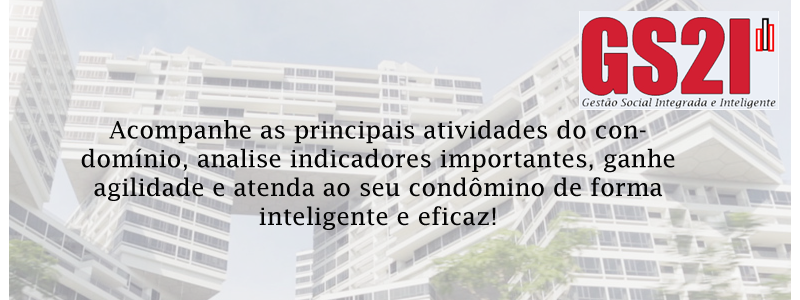
<style>
.page{position:relative;width:800px;height:300px}
.page>*{position:absolute;margin:0}
.t1{font:24px "LucidaFax";color:#040404}
</style>
<div class="page">
<p class="t1" style="left:81px;top:120px;width:594px;height:110px;text-align:center">Acompanhe as principais atividades do condomínio, analise indicadores importantes, ganhe agilidade e atenda ao seu condômino de forma inteligente e eficaz!</p>
</div>
